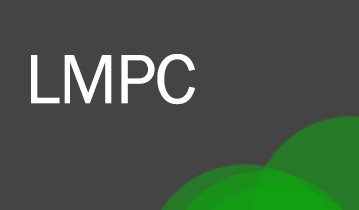
<style>
.page{position:relative;width:359px;height:210px;background:#444444}
.page>*{position:absolute;margin:0}
.t1{font:72px "FranklinGothic-Book";letter-spacing:-0.02em;color:#ffffff}
</style>
<div class="page">
<p class="t1" style="left:31px;top:54px;width:164px;height:51px">LMPC</p>
</div>
